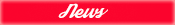
<style>
.page{position:relative;width:175px;height:25px;background:#fb042d}
.page>*{position:absolute;margin:0}
.t1{font:14.2px "Streetwear";color:#fdfcfc;scale:1.07 1}
</style>
<div class="page">
<p class="t1" style="left:58px;top:3px;width:50px;height:15px">News</p>
</div>
